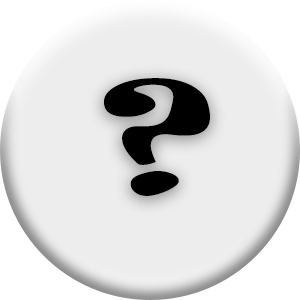
<style>
.page{position:relative;width:300px;height:300px;background:#ededed}
.page>*{position:absolute;margin:0}
.t1{font:150px "Ravie";color:#000000}
</style>
<div class="page">
<p class="t1" style="left:104px;top:78px;width:106px;height:118px">?</p>
</div>
